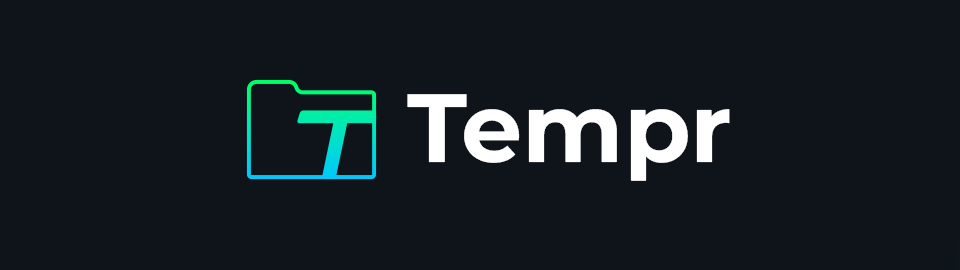
<style>
.page{position:relative;width:960px;height:270px;background:#0f131a}
.page>*{position:absolute;margin:0}
.t1{font:96.7px "Montserrat-Bold";color:#ffffff}
</style>
<div class="page">
<p class="t1" style="left:407px;top:94px;width:323px;height:87px">Tempr</p>
</div>
